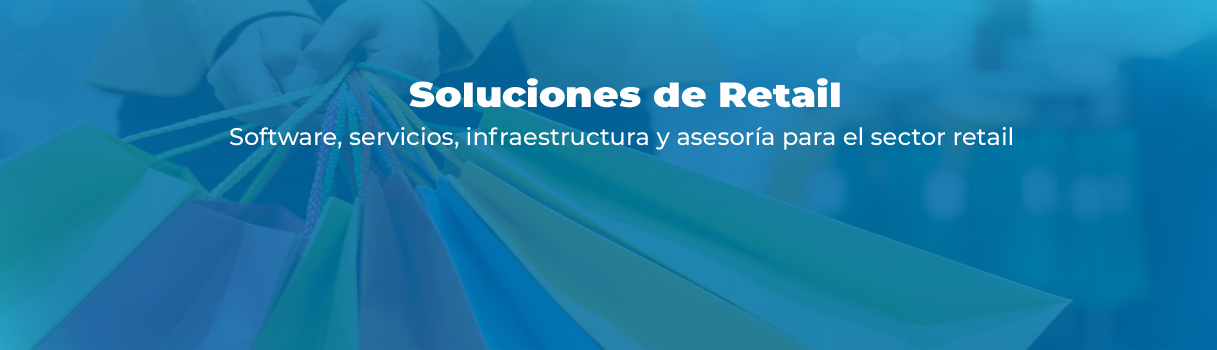
<style>
.page{position:relative;width:1217px;height:350px}
.page>*{position:absolute;margin:0}
.t1{font:36px "Montserrat-Black";color:#ffffff;scale:1.09 1}
.t2{font:24px "Montserrat-Medium";color:#ffffff}
</style>
<div class="page">
<p class="t1" style="left:409px;top:78px;width:431px;height:30px">Soluciones de Retail</p>
<p class="t2" style="left:230px;top:127px;width:782px;height:23px">Software, servicios, infraestructura y asesoría para el sector retail</p>
</div>
